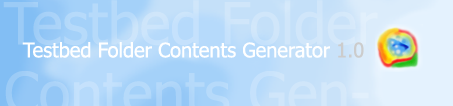
<style>
.page{position:relative;width:453px;height:106px}
.page>*{position:absolute;margin:0}
.t1{font:20px "Tahoma";color:#ffffff}
.t2{font:20px "Tahoma";color:#cccccc}
</style>
<div class="page">
<p class="t1" style="left:22px;top:42px;width:342px;height:16px">Testbed Folder Contents Generator <span class="t2">1.0</span></p>
</div>
